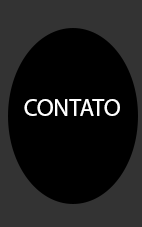
<style>
.page{position:relative;width:142px;height:227px;background:#000000}
.page>*{position:absolute;margin:0}
.t1{font:24px "MyriadPro-Regular";color:#ffffff}
</style>
<div class="page">
<p class="t1" style="left:24px;top:99px;width:96px;height:17px">CONTATO</p>
</div>
